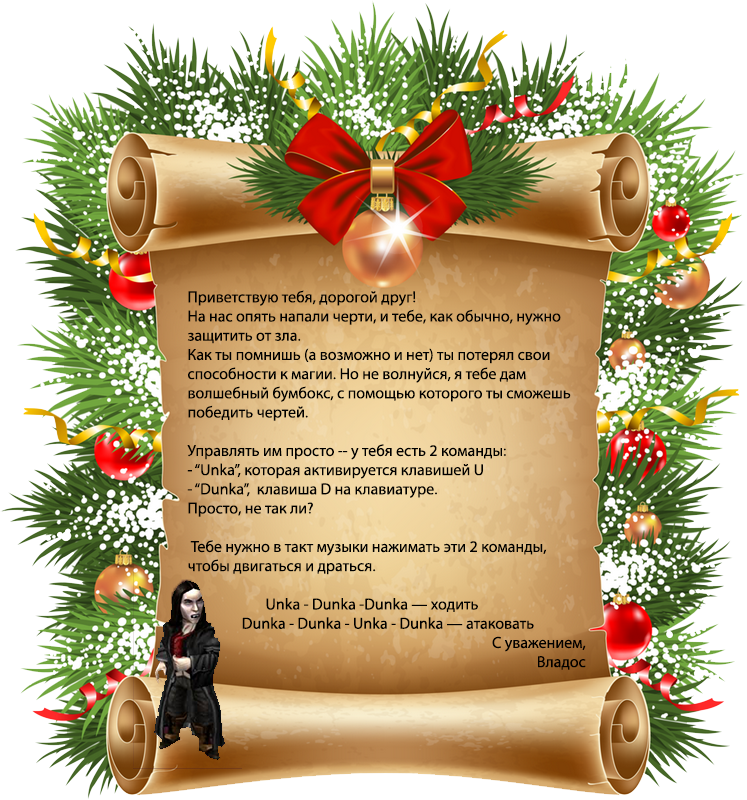
<style>
.page{position:relative;width:747px;height:800px;background:#ffffff}
.page>*{position:absolute;margin:0}
.t1{font:16px "MyriadPro-Regular";color:#000000}
</style>
<div class="page">
<p class="t1" style="left:187px;top:290px;width:399px;height:380px">Приветствую тебя, дорогой друг!<br>На нас опять напали черти, и тебе, как обычно, нужно защитить от зла.<br>Как ты помнишь (а возможно и нет) ты потерял свои способности к магии. Но не волнуйся, я тебе дам волшебный бумбокс, с помощью которого ты сможешь победить чертей.<br><br>Управлять им просто -- у тебя есть 2 команды: <br>- “Unka”, которая активируется клавишей U<br>- “Dunka”,  клавиша D на клавиатуре.<br>Просто, не так ли?<br><br> Тебе нужно в такт музыки нажимать эти 2 команды, чтобы двигаться и драться.<br><br>                       Unka - Dunka -Dunka — ходить<br>                Dunka - Dunka - Unka - Dunka — атаковать<br>С уважением,  <br>Владос</p>
</div>
